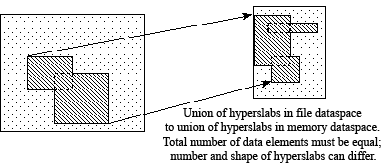
<style>
.page{position:relative;width:389px;height:166px;background:#ffffff}
.page>*{position:absolute;margin:0}
.t1{font:12px "TimesNewRomanPSMT";color:#000000}
</style>
<div class="page">
<p class="t1" style="left:163px;top:108px;width:218px;height:55px;text-align:center">Union of hyperslabs in file dataspace <br>to union of hyperslabs in memory dataspace. <br>Total number of data elements must be equal; <br>number and shape of hyperslabs can differ.</p>
</div>
